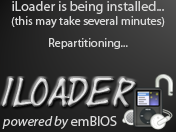
<style>
.page{position:relative;width:176px;height:132px}
.page>*{position:absolute;margin:0}
.t1{font:12px "MyriadPro-Regular";color:#d8d8d8}
.t2{font:14px "MyriadPro-Regular";color:#d8d8d8}
.t3{font:30px "Yearsupplyoffairycakes"}
.t4{font:14px "MyriadPro-It";color:#d8d8d8}
</style>
<div class="page">
<p class="t1" style="left:11px;top:1px;width:154px;height:48px;text-align:center"><span class="t2">iLoader is being installed...<br></span>(this may take several minutes)<br><br>Repartitioning...</p>
<p class="t3" style="left:2px;top:78px;width:134px;height:29px">iLoader</p>
<p class="t4" style="left:2px;top:116px;width:115px;height:13px">powered by<span class="t2"> emBIOS</span></p>
</div>
